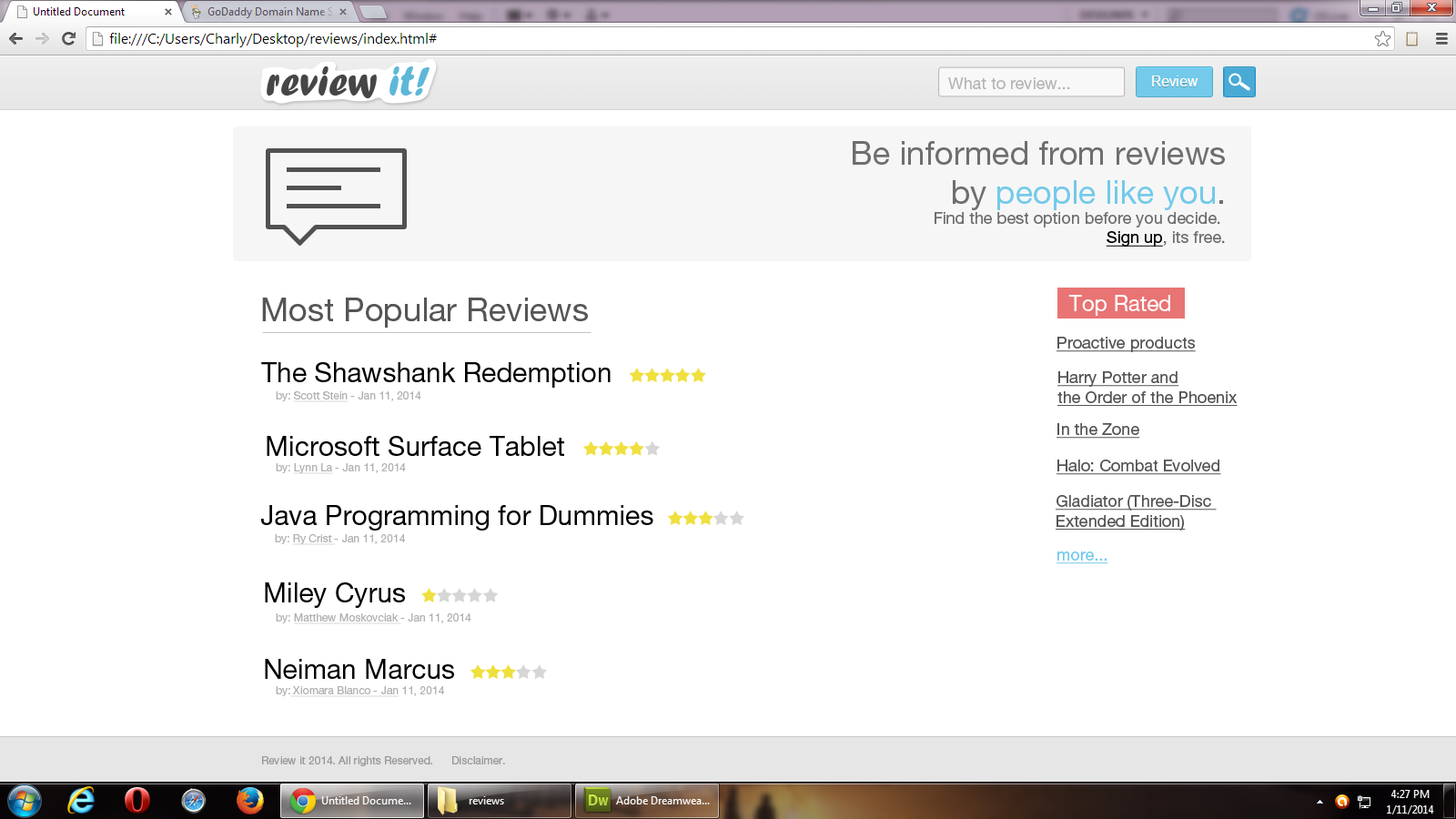
<style>
.page{position:relative;width:1456px;height:819px;background:#ffffff}
.page>*{position:absolute;margin:0}
.t1{font:43.7px "ForteMT";color:#464646}
.t2{font:43.7px "ForteMT";color:#5eb7d8}
.t3{font:16.4px "HelveticaNeueLTPro-Roman";color:#b7b6b6}
.t4{font:16.4px "HelveticaNeueLTPro-Roman";color:#6e6e6e}
.t5{font:32.8px "HelveticaNeueLTPro-Roman";color:#6e6e6e}
.t6{font:32.8px "HelveticaNeueLTPro-Roman";color:#73caea}
.t7{font:16.4px "HelveticaNeueLTPro-Roman";color:#000000;text-decoration:underline}
.t8{font:32.8px "HelveticaNeueLTPro-Roman";color:#555555}
.t9{font:21.8px "HelveticaNeueLTPro-Roman";color:#ffffff}
.t10{font:16.4px "HelveticaNeueLTPro-Roman";color:#555555;text-decoration:underline}
.t11{font:27.3px "HelveticaNeueLTPro-Roman";color:#000000}
.t12{font:10.9px "HelveticaNeueLTPro-Roman";color:#b2b2b2}
.t13{font:10.9px "HelveticaNeueLTPro-Roman";color:#b2b2b2;text-decoration:underline}
.t14{font:16.4px "HelveticaNeueLTPro-Roman";color:#73caea;text-decoration:underline}
.t15{font:10.9px "HelveticaNeueLTPro-Roman";color:#999999}
</style>
<div class="page">
<p class="t1" style="left:267px;top:66px;width:163px;height:32px">review <span class="t2">it!</span></p>
<p class="t3" style="left:948px;top:77px;width:122px;height:12px">What to review...</p>
<p class="t4" style="left:853px;top:141px;width:372px;height:106px;text-align:right"><span class="t5">Be informed from reviews<br>by </span><span class="t6">people like you</span><span class="t5">.<br></span>Find the best option before you decide. <br><span class="t7">Sign up</span>, its free.</p>
<p class="t8" style="left:262px;top:298px;width:326px;height:30px">Most Popular Reviews</p>
<p class="t9" style="left:1068px;top:295px;width:102px;height:21px">Top Rated</p>
<p class="t10" style="left:1056px;top:337px;width:140px;height:15px">Proactive products</p>
<p class="t11" style="left:261px;top:362px;width:350px;height:26px">The Shawshank Redemption</p>
<p class="t10" style="left:1057px;top:371px;width:181px;height:35px">Harry Potter and<br>the Order of the Phoenix</p>
<p class="t12" style="left:276px;top:391px;width:145px;height:11px">by: <span class="t13">Scott Stein</span> - Jan 11, 2014</p>
<p class="t10" style="left:1056px;top:423px;width:84px;height:16px">In the Zone</p>
<p class="t11" style="left:267px;top:436px;width:297px;height:20px">Microsoft Surface Tablet</p>
<p class="t10" style="left:1056px;top:460px;width:165px;height:15px">Halo: Combat Evolved</p>
<p class="t12" style="left:276px;top:463px;width:130px;height:11px">by: <span class="t13">Lynn La</span> - Jan 11, 2014</p>
<p class="t10" style="left:1056px;top:495px;width:161px;height:36px">Gladiator (Three-Disc <br>Extended Edition)</p>
<p class="t11" style="left:261px;top:505px;width:392px;height:26px">Java Programming for Dummies</p>
<p class="t12" style="left:275px;top:534px;width:131px;height:11px">by: <span class="t13">Ry Crist </span>- Jan 11, 2014</p>
<p class="t14" style="left:1056px;top:551px;width:52px;height:13px">more...</p>
<p class="t11" style="left:265px;top:582px;width:140px;height:26px">Miley Cyrus</p>
<p class="t13" style="left:276px;top:613px;width:195px;height:11px"><span class="t12">by: </span>Matthew Moskovciak <span class="t12">- Jan 11, 2014</span></p>
<p class="t11" style="left:265px;top:659px;width:189px;height:20px">Neiman Marcus</p>
<p class="t13" style="left:276px;top:686px;width:169px;height:11px"><span class="t12">by:</span> Xiomara Blanco - Jan<span class="t12"> 11, 2014</span></p>
<p class="t15" style="left:262px;top:756px;width:243px;height:10px">Review it 2014. All rights Reserved.      Disclaimer.</p>
</div>
